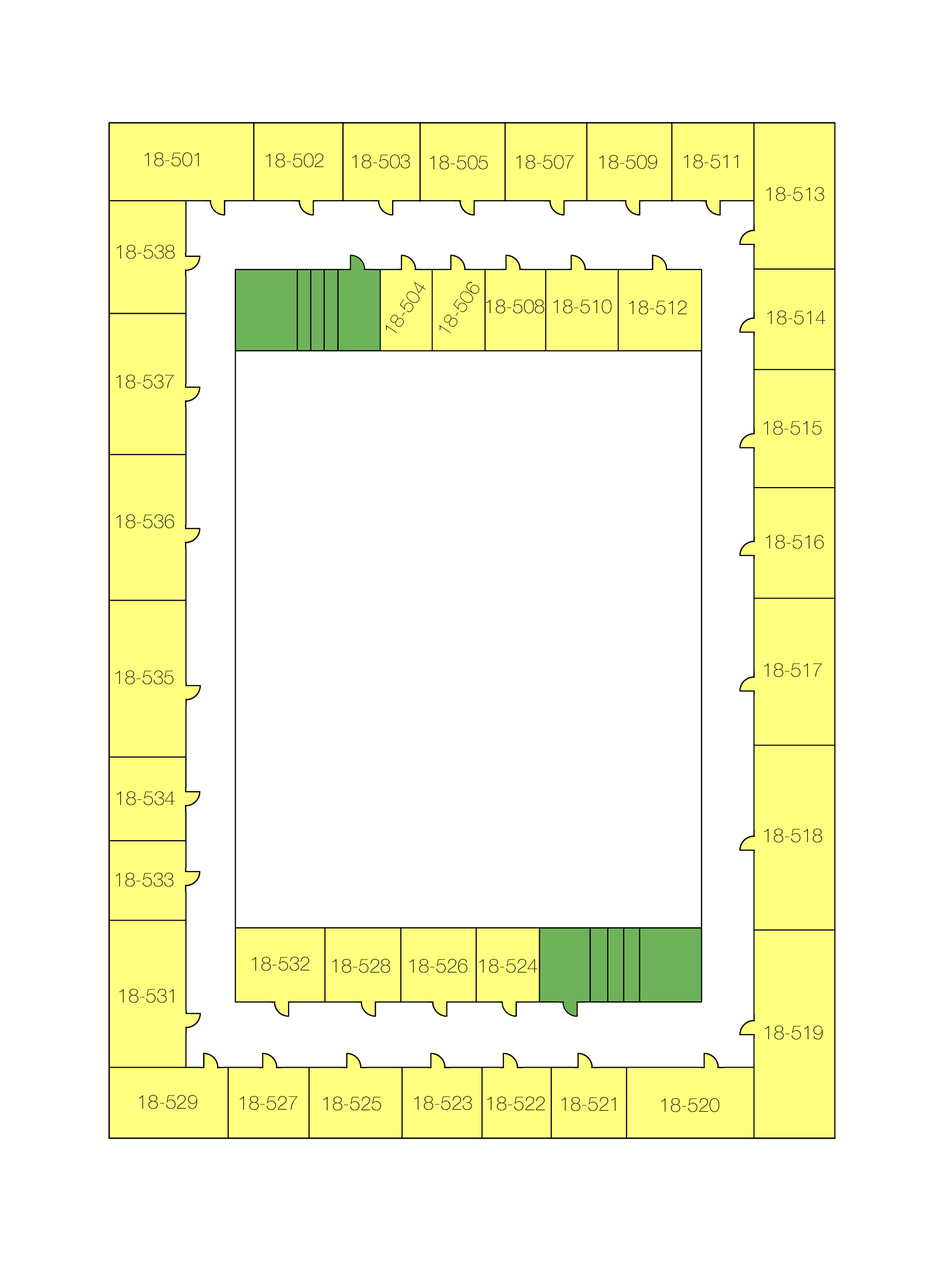
<style>
.page{position:relative;width:946px;height:1261px;background:#ffffff}
.page>*{position:absolute;margin:0}
.t1{font:19.5px "HelveticaNeue-Thin";color:#090909}
</style>
<div class="page">
<p class="t1" style="left:144px;top:152px;width:55px;height:15px">18-501</p>
<p class="t1" style="left:266px;top:153px;width:58px;height:15px">18-502</p>
<p class="t1" style="left:352px;top:154px;width:58px;height:15px">18-503</p>
<p class="t1" style="left:430px;top:156px;width:58px;height:14px">18-505</p>
<p class="t1" style="left:516px;top:155px;width:58px;height:14px">18-507</p>
<p class="t1" style="left:599px;top:155px;width:58px;height:14px">18-509</p>
<p class="t1" style="left:684px;top:154px;width:54px;height:15px">18-511</p>
<p class="t1" style="left:766px;top:187px;width:58px;height:14px">18-513</p>
<p class="t1" style="left:117px;top:245px;width:58px;height:14px">18-538</p>
<p class="t1" style="left:386px;top:282px;width:40px;height:51px;rotate:-56deg">18-504</p>
<p class="t1" style="left:439px;top:282px;width:40px;height:51px;rotate:-56deg">18-506</p>
<p class="t1" style="left:486px;top:299px;width:58px;height:15px">18-508</p>
<p class="t1" style="left:553px;top:299px;width:59px;height:15px">18-510</p>
<p class="t1" style="left:629px;top:301px;width:58px;height:14px">18-512</p>
<p class="t1" style="left:767px;top:311px;width:58px;height:14px">18-514</p>
<p class="t1" style="left:116px;top:375px;width:58px;height:14px">18-537</p>
<p class="t1" style="left:763px;top:421px;width:58px;height:14px">18-515</p>
<p class="t1" style="left:116px;top:514px;width:58px;height:15px">18-536</p>
<p class="t1" style="left:765px;top:535px;width:59px;height:14px">18-516</p>
<p class="t1" style="left:764px;top:663px;width:58px;height:14px">18-517</p>
<p class="t1" style="left:116px;top:670px;width:57px;height:15px">18-535</p>
<p class="t1" style="left:117px;top:791px;width:58px;height:14px">18-534</p>
<p class="t1" style="left:764px;top:829px;width:58px;height:14px">18-518</p>
<p class="t1" style="left:116px;top:873px;width:57px;height:14px">18-533</p>
<p class="t1" style="left:252px;top:957px;width:57px;height:14px">18-532</p>
<p class="t1" style="left:332px;top:959px;width:58px;height:14px">18-528</p>
<p class="t1" style="left:409px;top:959px;width:59px;height:14px">18-526</p>
<p class="t1" style="left:479px;top:959px;width:58px;height:14px">18-524</p>
<p class="t1" style="left:119px;top:989px;width:55px;height:14px">18-531</p>
<p class="t1" style="left:764px;top:1026px;width:59px;height:14px">18-519</p>
<p class="t1" style="left:139px;top:1095px;width:59px;height:14px">18-529</p>
<p class="t1" style="left:240px;top:1096px;width:57px;height:14px">18-527</p>
<p class="t1" style="left:323px;top:1096px;width:58px;height:15px">18-525</p>
<p class="t1" style="left:414px;top:1096px;width:58px;height:14px">18-523</p>
<p class="t1" style="left:487px;top:1096px;width:58px;height:15px">18-522</p>
<p class="t1" style="left:561px;top:1097px;width:55px;height:14px">18-521</p>
<p class="t1" style="left:661px;top:1098px;width:58px;height:14px">18-520</p>
</div>
